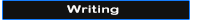
<style>
.page{position:relative;width:224px;height:20px;background:#111111}
.page>*{position:absolute;margin:0}
.t1{font:10.2px "ArialRoundedMTBold";color:#fcfcfc;scale:1.47 1}
</style>
<div class="page">
<p class="t1" style="left:67px;top:5px;width:52px;height:10px">Writing</p>
</div>
